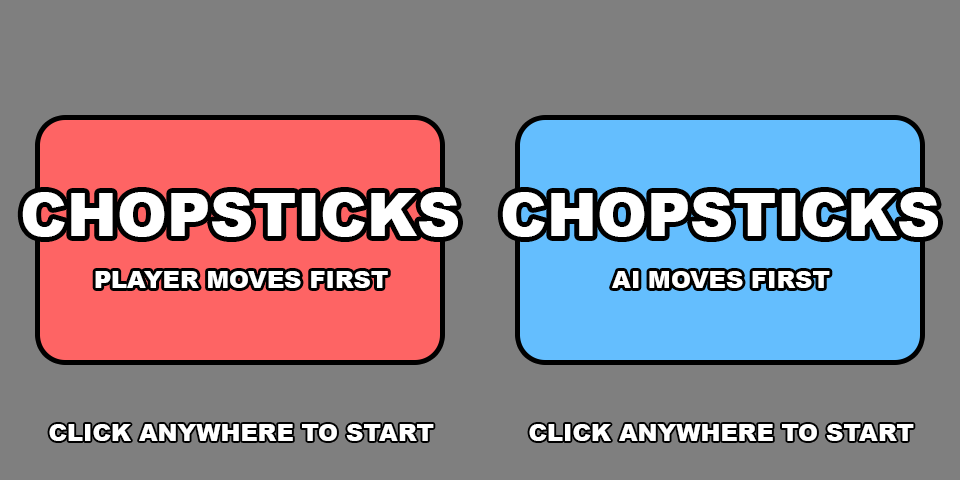
<style>
.page{position:relative;width:960px;height:480px;background:#7f7f7f}
.page>*{position:absolute;margin:0}
.t1{font:60px "Arial-Black";color:#ffffff}
.t2{font:24px "Arial-Black";color:#ffffff}
</style>
<div class="page">
<p class="t1" style="left:22px;top:192px;width:436px;height:45px">CHOPSTICKS</p>
<p class="t1" style="left:502px;top:192px;width:436px;height:45px">CHOPSTICKS</p>
<p class="t2" style="left:95px;top:271px;width:293px;height:17px">PLAYER MOVES FIRST</p>
<p class="t2" style="left:612px;top:271px;width:218px;height:17px">AI MOVES FIRST</p>
<p class="t2" style="left:49px;top:424px;width:385px;height:17px">CLICK ANYWHERE TO START</p>
<p class="t2" style="left:529px;top:424px;width:385px;height:17px">CLICK ANYWHERE TO START</p>
</div>
